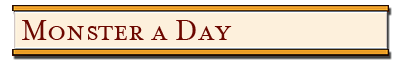
<style>
.page{position:relative;width:400px;height:60px;background:#fdf0dc}
.page>*{position:absolute;margin:0}
.t1{font:32.1px "MrsEavesSmallCaps";color:#6c0700}
</style>
<div class="page">
<p class="t1" style="left:22px;top:20px;width:210px;height:20px">Monster a Day</p>
</div>
